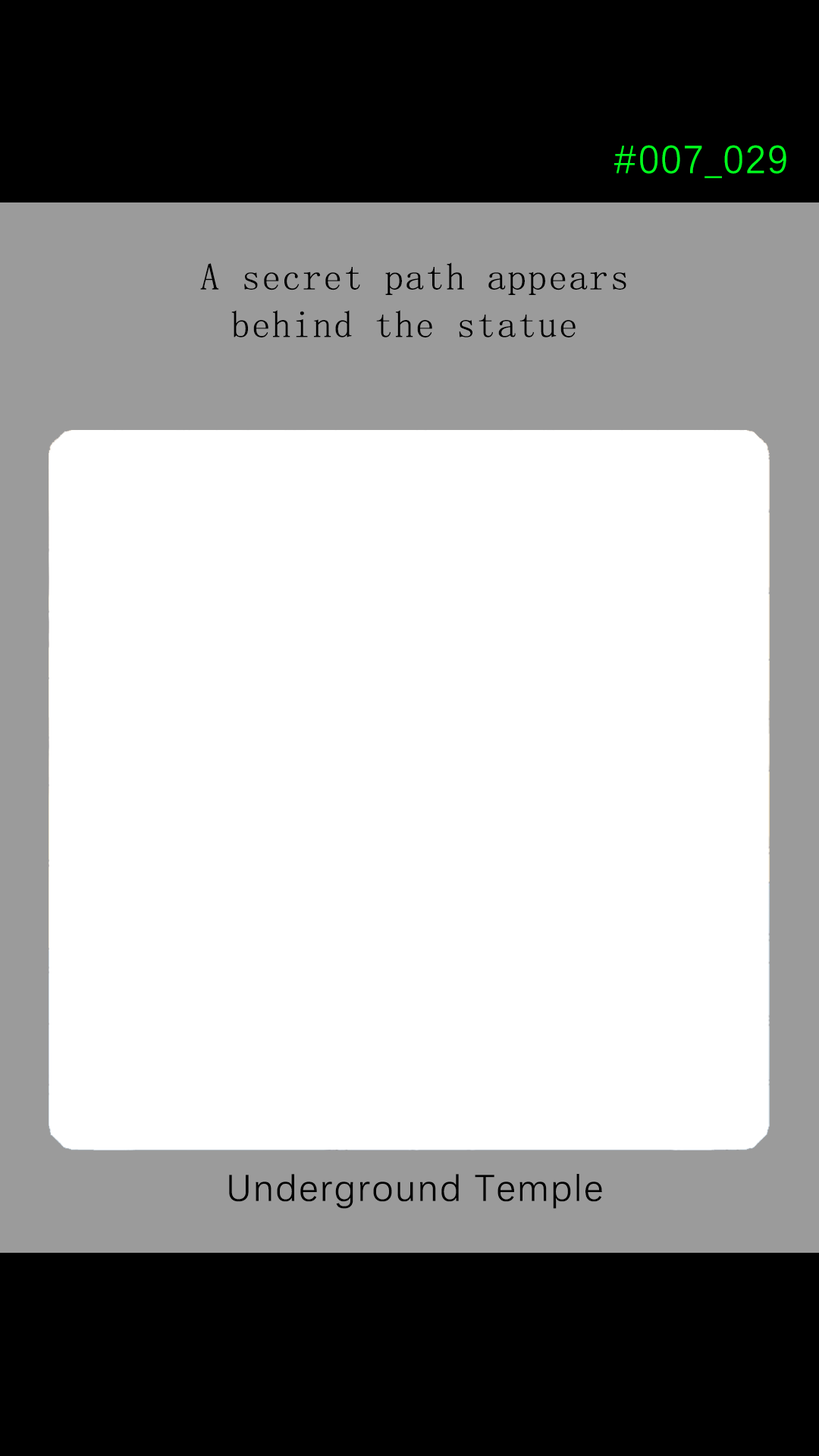
<style>
.page{position:relative;width:819px;height:1456px;background:#ffffff}
.page>*{position:absolute;margin:0}
.t1{font:39.2px "DengXian-Regular";letter-spacing:0.04em;color:#00ff1e}
.t2{font:37.9px/47.6px "SimSun";letter-spacing:0.04em;color:#000000}
.t3{font:37.9px "DengXian-Regular";letter-spacing:0.04em;color:#000000}
</style>
<div class="page">
<p class="t1" style="left:614px;top:145px;width:172px;height:33px">#007_029</p>
<p class="t2" style="left:200px;top:262px;width:426px;height:75px;text-align:center">A secret path appears<br>behind the statue</p>
<p class="t3" style="left:229px;top:1174px;width:373px;height:35px">Underground Temple</p>
</div>
